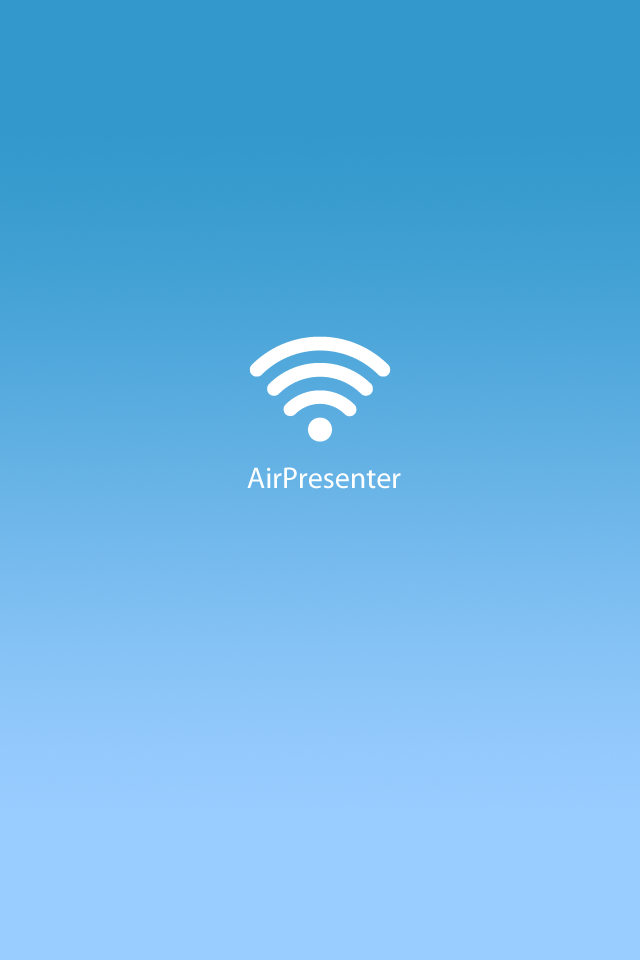
<style>
.page{position:relative;width:640px;height:960px}
.page>*{position:absolute;margin:0}
.t1{font:30px "MyriadPro-Regular";color:#ffffff}
</style>
<div class="page">
<p class="t1" style="left:247px;top:467px;width:154px;height:22px">AirPresenter</p>
</div>
